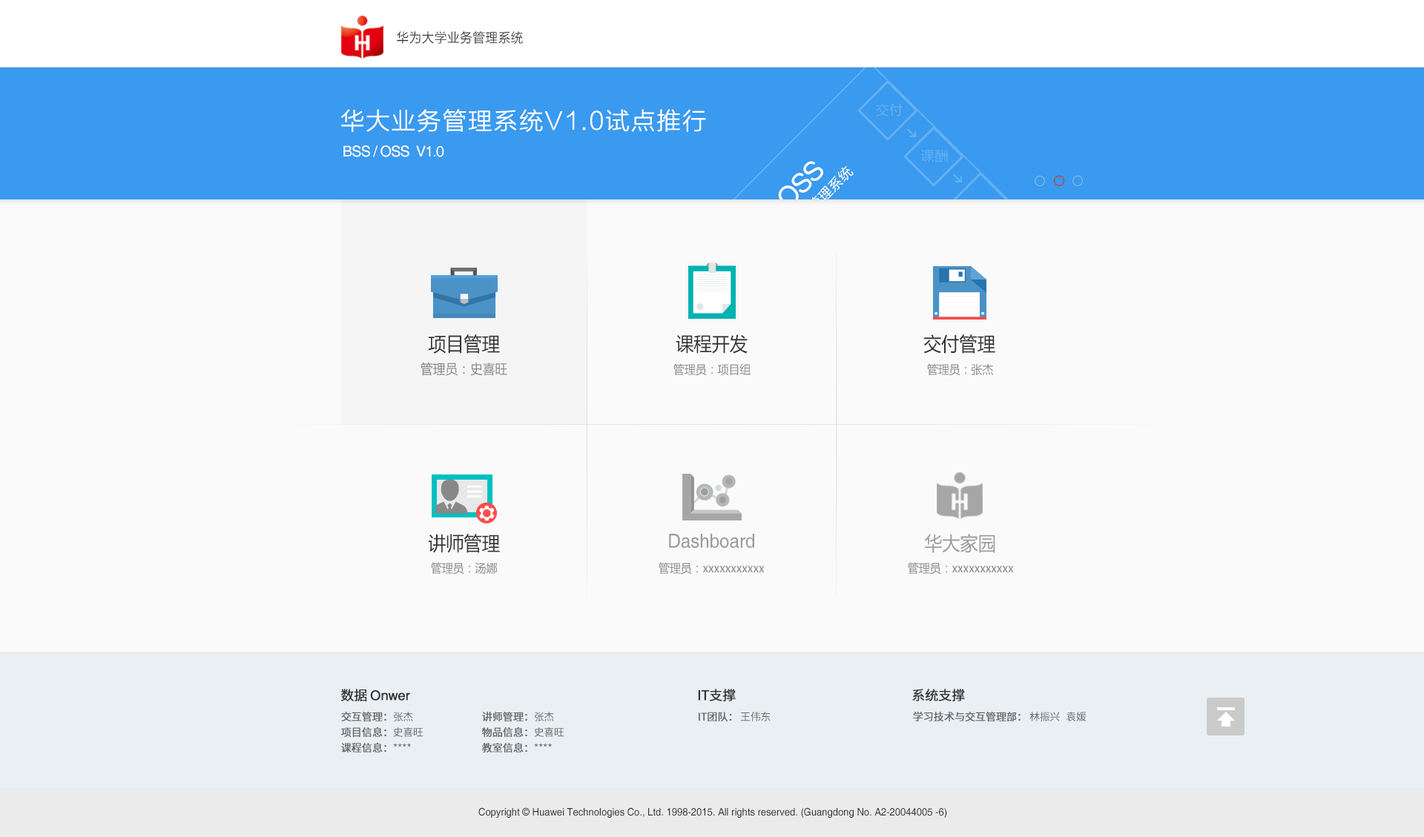
<style>
.page{position:relative;width:1424px;height:837px;background:#fafafa}
.page>*{position:absolute;margin:0}
.t1{font:13.4px "FZLTXHK";letter-spacing:0.025em;color:#333333;scale:0.93 1}
.t2{font:23.7px "FZLTXHK--GBK1-0";letter-spacing:0.05em;color:#ffffff;font-weight:bold}
.t3{font:13.4px "MicrosoftYaHei";letter-spacing:0.05em;color:#63b0f2}
.t4{font:14.8px "Helvetica";letter-spacing:-0.05em;color:#ffffff}
.t5{font:26.7px "Helvetica";letter-spacing:-0.05em;color:#ffffff}
.t6{font:13.4px "MicrosoftYaHei";letter-spacing:0.05em;color:#ffffff}
.t7{font:19.3px "MicrosoftYaHei";color:#333333;scale:0.93 1}
.t8{font:13.4px "MicrosoftYaHei";color:#878787;scale:0.93 1}
.t9{font:11.9px "MicrosoftYaHei";color:#8a8a8a;scale:0.93 1}
.t10{font:19.3px "Helvetica";color:#9c9c9c;scale:0.93 1}
.t11{font:19.3px "MicrosoftYaHei";color:#9c9c9c;scale:0.93 1}
.t12{font:13.4px "Helvetica";letter-spacing:-0.025em;color:#333333;font-weight:bold}
.t13{font:13.4px "SourceHanSansCN-Regular";letter-spacing:-0.025em;color:#333333;font-weight:bold}
.t14{font:10.4px "SourceHanSansCN-Regular";letter-spacing:-0.025em;color:#666666;font-weight:bold}
.t15{font:10.4px "SourceHanSansCN-Regular";letter-spacing:-0.025em;color:#666666}
.t16{font:10.4px "Helvetica";color:#333333;scale:0.93 1}
</style>
<div class="page">
<p class="t1" style="left:397px;top:31px;width:126px;height:13px">华为大学业务管理系统</p>
<p class="t2" style="left:341px;top:109px;width:365px;height:23px">华大业务管理系统V1.0试点推行</p>
<p class="t3" style="left:876px;top:103px;width:27px;height:13px">交付</p>
<p class="t4" style="left:343px;top:145px;width:101px;height:12px">BSS / OSS  V1.0</p>
<p class="t3" style="left:920px;top:149px;width:28px;height:13px">课酬</p>
<p class="t5" style="left:778px;top:161px;width:45px;height:45px;rotate:-45deg">OSS</p>
<p class="t6" style="left:808px;top:166px;width:46px;height:45px;rotate:-45deg">管理系统</p>
<p class="t7" style="left:428px;top:334px;width:72px;height:20px">项目管理</p>
<p class="t7" style="left:676px;top:334px;width:72px;height:20px">课程开发</p>
<p class="t7" style="left:923px;top:334px;width:72px;height:20px">交付管理</p>
<p class="t8" style="left:421px;top:362px;width:86px;height:14px">管理员：史喜旺</p>
<p class="t9" style="left:673px;top:363px;width:78px;height:13px">管理员：项目组</p>
<p class="t9" style="left:927px;top:363px;width:67px;height:13px">管理员：张杰</p>
<p class="t7" style="left:428px;top:534px;width:72px;height:19px">讲师管理</p>
<p class="t10" style="left:669px;top:534px;width:85px;height:14px">Dashboard</p>
<p class="t11" style="left:924px;top:534px;width:71px;height:19px">华大家园</p>
<p class="t9" style="left:431px;top:562px;width:67px;height:13px">管理员：汤娜</p>
<p class="t9" style="left:659px;top:562px;width:106px;height:13px">管理员：xxxxxxxxxxx</p>
<p class="t9" style="left:908px;top:562px;width:106px;height:13px">管理员：xxxxxxxxxxx</p>
<p class="t12" style="left:340px;top:689px;width:70px;height:13px"><span class="t13">数据 </span>Onwer</p>
<p class="t13" style="left:698px;top:689px;width:38px;height:13px">IT支撑</p>
<p class="t13" style="left:912px;top:689px;width:53px;height:13px">系统支撑</p>
<p class="t14" style="left:341px;top:712px;width:72px;height:10px">交互管理：<span class="t15">张杰</span></p>
<p class="t14" style="left:482px;top:712px;width:72px;height:10px">讲师管理：<span class="t15">张杰</span></p>
<p class="t14" style="left:699px;top:712px;width:72px;height:10px">IT团队：<span class="t15"> 王伟东</span></p>
<p class="t14" style="left:913px;top:711px;width:174px;height:11px">学习技术与交互管理部： <span class="t15">林振兴   袁媛</span></p>
<p class="t14" style="left:341px;top:727px;width:83px;height:11px">项目信息：<span class="t15">史喜旺</span></p>
<p class="t14" style="left:481px;top:727px;width:83px;height:11px">物品信息：<span class="t15">史喜旺</span></p>
<p class="t14" style="left:341px;top:742px;width:70px;height:11px">课程信息：<span class="t15">****</span></p>
<p class="t14" style="left:482px;top:742px;width:70px;height:11px">教室信息：<span class="t15">****</span></p>
<p class="t16" style="left:478px;top:808px;width:469px;height:10px">Copyright © Huawei Technologies Co., Ltd. 1998-2015. All rights reserved. (Guangdong No. A2-20044005 -6)</p>
</div>
